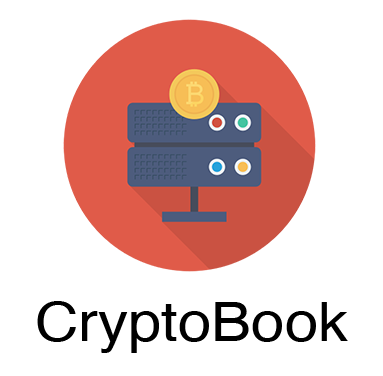
<style>
.page{position:relative;width:383px;height:376px;background:#ffffff}
.page>*{position:absolute;margin:0}
.t1{font:54.6px "Helvetica";color:#000000;scale:1.1 1}
</style>
<div class="page">
<p class="t1" style="left:37px;top:301px;width:311px;height:52px">CryptoBook</p>
</div>
